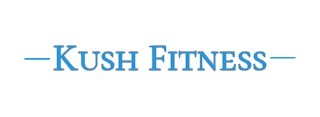
<style>
.page{position:relative;width:320px;height:117px;background:#ffffff}
.page>*{position:absolute;margin:0}
.t1{font:38.2px "CormorantSC-Regular";color:#129cf3}
</style>
<div class="page">
<p class="t1" style="left:54px;top:46px;width:212px;height:25px">Kush Fitness</p>
<p class="t1" style="left:54px;top:46px;width:212px;height:25px">Kush Fitness</p>
<p class="t1" style="left:54px;top:46px;width:212px;height:25px">Kush Fitness</p>
</div>
